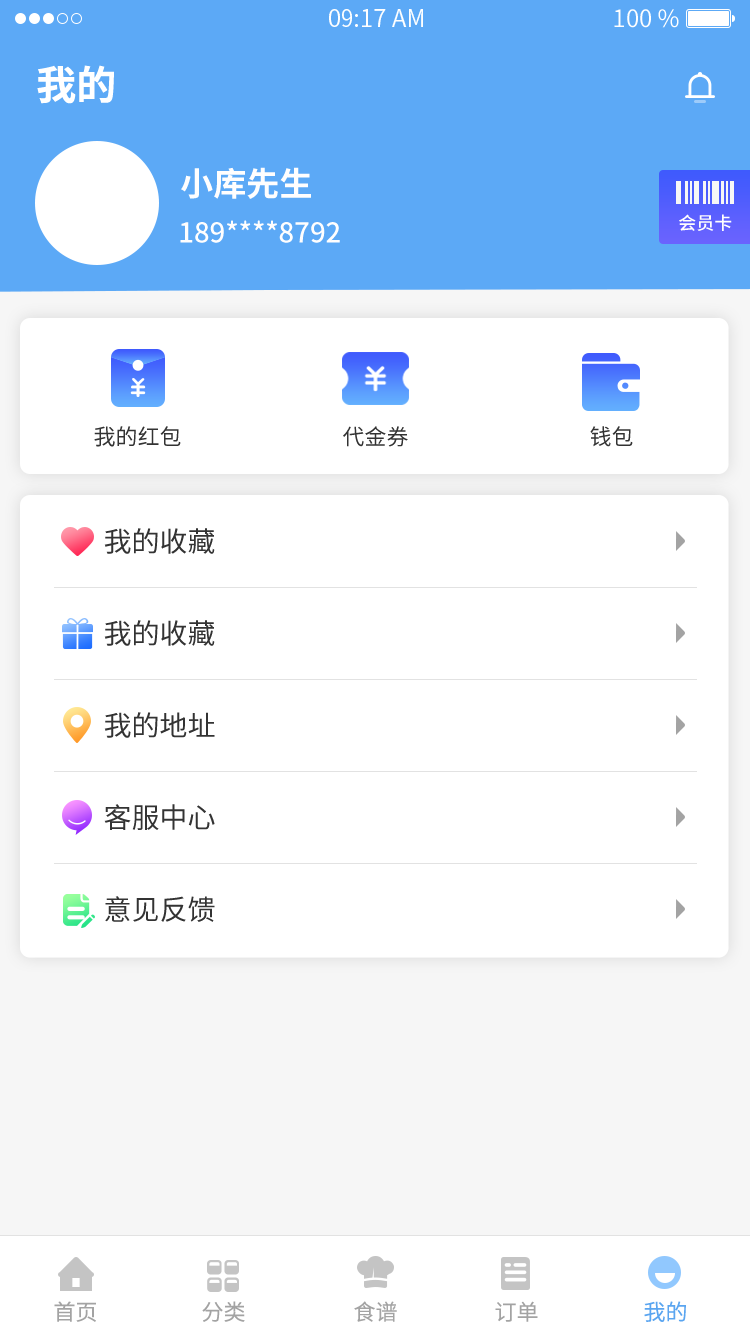
<style>
.page{position:relative;width:750px;height:1334px;background:#ffffff}
.page>*{position:absolute;margin:0}
.t1{font:40px "SourceHanSansCN-Bold";color:#ffffff}
.t2{font:33px "SourceHanSansCN-Bold";color:#fffefe}
.t3{font:27.5px "SourceHanSansCN-Medium";color:#fffefe}
.t4{font:18px "SourceHanSansCN-Medium";color:#fffefe}
.t5{font:22px "SourceHanSansCN-Regular";color:#333333}
.t6{font:28px "SourceHanSansCN-Regular";color:#333333}
.t7{font:22px "SourceHanSansCN-Normal";color:#a3a3a3}
.t8{font:22px "SourceHanSansCN-Normal";color:#5aa5f0}
</style>
<div class="page">
<p class="t1" style="left:37px;top:65px;width:77px;height:39px">我的</p>
<p class="t2" style="left:181px;top:167px;width:130px;height:32px">小库先生</p>
<p class="t3" style="left:180px;top:220px;width:160px;height:23px">189****8792</p>
<p class="t4" style="left:679px;top:214px;width:53px;height:17px">会员卡</p>
<p class="t5" style="left:94px;top:426px;width:87px;height:21px">我的红包</p>
<p class="t5" style="left:343px;top:426px;width:65px;height:21px">代金券</p>
<p class="t5" style="left:590px;top:426px;width:43px;height:21px">钱包</p>
<p class="t6" style="left:104px;top:528px;width:111px;height:26px">我的收藏</p>
<p class="t6" style="left:104px;top:620px;width:111px;height:26px">我的收藏</p>
<p class="t6" style="left:104px;top:712px;width:111px;height:26px">我的地址</p>
<p class="t6" style="left:104px;top:804px;width:111px;height:26px">客服中心</p>
<p class="t6" style="left:105px;top:896px;width:110px;height:26px">意见反馈</p>
<p class="t7" style="left:54px;top:1301px;width:42px;height:21px">首页</p>
<p class="t7" style="left:202px;top:1301px;width:43px;height:21px">分类</p>
<p class="t7" style="left:354px;top:1301px;width:43px;height:21px">食谱</p>
<p class="t7" style="left:495px;top:1301px;width:43px;height:21px">订单</p>
<p class="t8" style="left:644px;top:1301px;width:42px;height:21px">我的</p>
</div>
